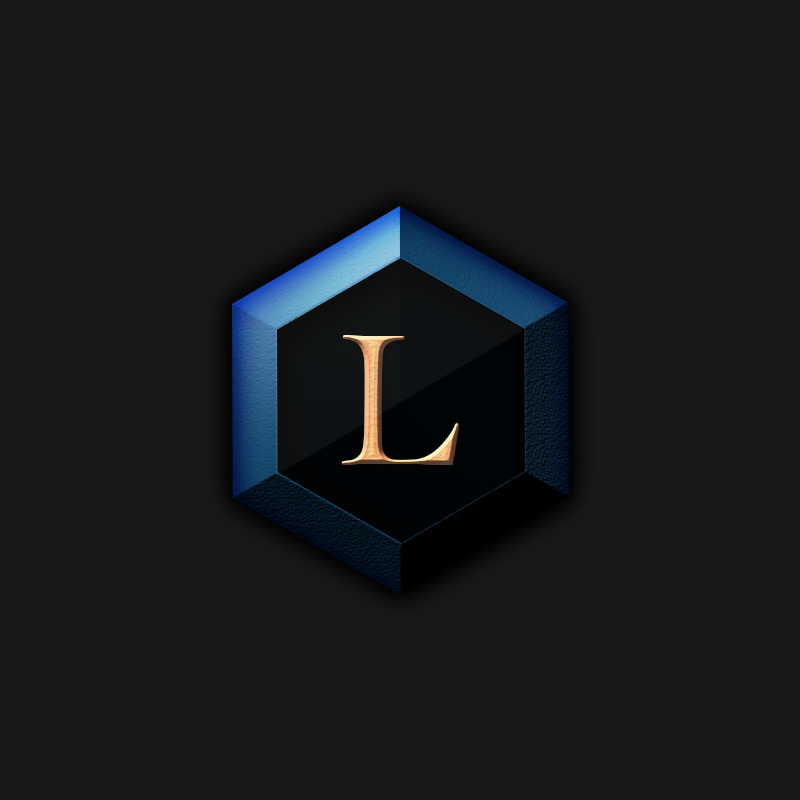
<style>
.page{position:relative;width:800px;height:800px;background:#191919}
.page>*{position:absolute;margin:0}
.t1{font:200px "BellMT"}
</style>
<div class="page">
<p class="t1" style="left:341px;top:335px;width:118px;height:130px">L</p>
<p class="t1" style="left:341px;top:335px;width:118px;height:130px">L</p>
</div>
